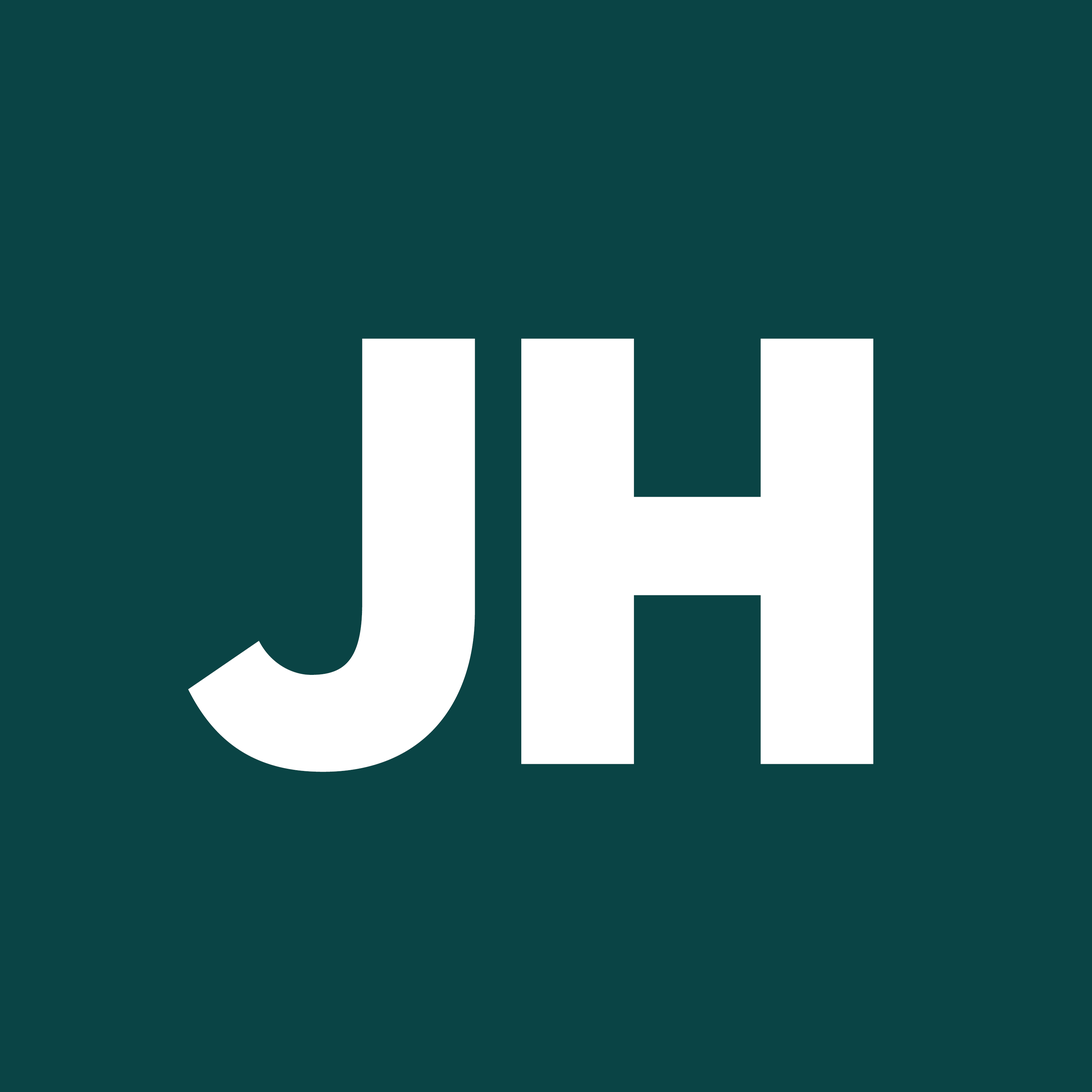
<style>
.page{position:relative;width:1092px;height:1092px;background:#0a4445}
.page>*{position:absolute;margin:0}
.t1{font:654.2px "SourceSansPro-Black";letter-spacing:-0.055em;color:#ffffff}
</style>
<div class="page">
<p class="t1" style="left:188px;top:339px;width:685px;height:433px">JH</p>
</div>
